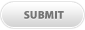
<style>
.page{position:relative;width:85px;height:30px}
.page>*{position:absolute;margin:0}
.t1{font:11px "MyriadPro-Bold";color:#757575;font-weight:bold}
</style>
<div class="page">
<p class="t1" style="left:24px;top:11px;width:40px;height:8px">SUBMIT</p>
</div>
